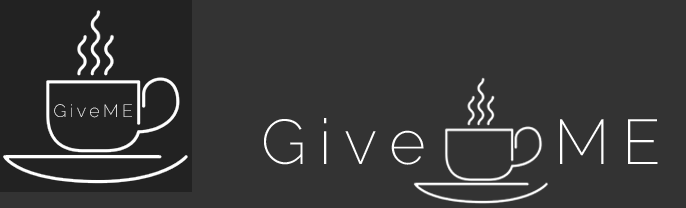
<style>
.page{position:relative;width:686px;height:208px;background:#333333}
.page>*{position:absolute;margin:0}
.t1{font:17.7px "Raleway-ExtraLight";letter-spacing:0.2em;color:#ffffff}
.t2{font:63.1px "Raleway-ExtraLight";letter-spacing:0.2em;color:#ffffff}
</style>
<div class="page">
<p class="t1" style="left:54px;top:104px;width:78px;height:14px">GiveME</p>
<p class="t2" style="left:264px;top:118px;width:394px;height:47px">Give    ME</p>
</div>
